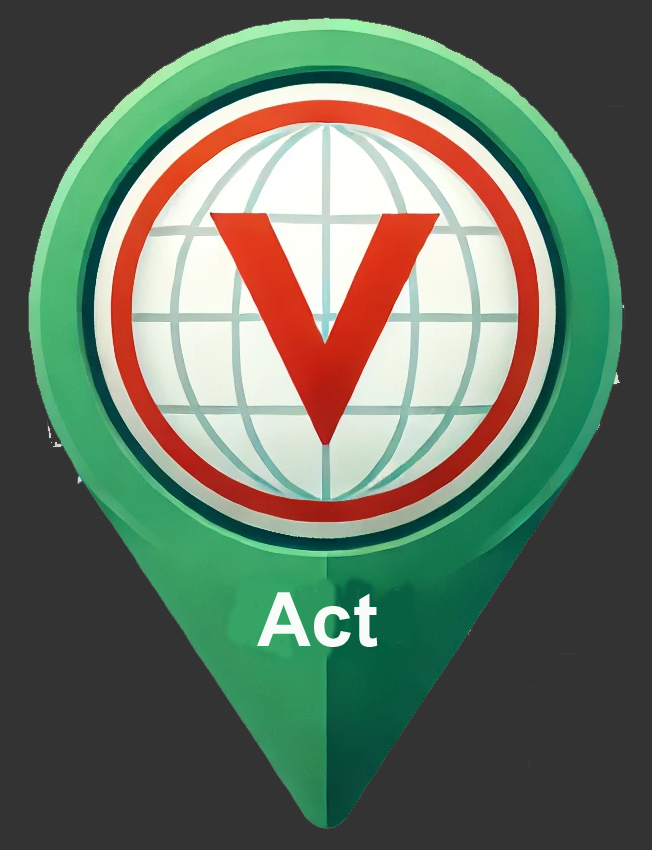
<style>
.page{position:relative;width:652px;height:850px;background:#333333}
.page>*{position:absolute;margin:0}
.t1{font:75px "Arial-BoldMT";color:#f8fdfa}
</style>
<div class="page">
<p class="t1" style="left:257px;top:592px;width:121px;height:55px">Act</p>
</div>
